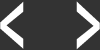
<style>
.page{position:relative;width:100px;height:50px;background:#333333}
.page>*{position:absolute;margin:0}
.t1{font:93.8px "MalgunGothicBold";color:#ffffff;scale:0.54 1}
</style>
<div class="page">
<p class="t1" style="left:0px;top:1px;width:24px;height:48px">&lt;</p>
<p class="t1" style="left:76px;top:1px;width:24px;height:49px">&gt;</p>
</div>
